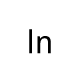
<style>
.page{position:relative;width:80px;height:80px;background:#ffffff}
.page>*{position:absolute;margin:0}
.t1{font:31.8px "DroidSans";color:#000000}
</style>
<div class="page">
<p class="t1" style="left:29px;top:29px;width:22px;height:25px">ln</p>
</div>
